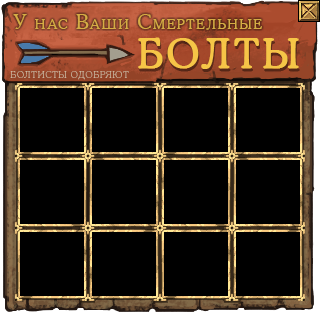
<style>
.page{position:relative;width:320px;height:320px;background:#000000}
.page>*{position:absolute;margin:0}
.t1{font:20.7px "CooperLightCBT";letter-spacing:0.07em;color:#d5ac44;font-variant:small-caps}
.t2{font:40.5px "CooperLightCBT";letter-spacing:0.07em;color:#f6c547;font-variant:small-caps;font-weight:bold}
.t3{font:9.4px "CooperLightCBT";letter-spacing:0.07em;color:#ccb9a0;text-transform:uppercase}
</style>
<div class="page">
<p class="t1" style="left:13px;top:14px;width:249px;height:16px">У нас Ваши Смертельные</p>
<p class="t2" style="left:138px;top:37px;width:161px;height:32px">БОЛТЫ</p>
<p class="t3" style="left:10px;top:71px;width:119px;height:9px">болтисты одобряют</p>
</div>
